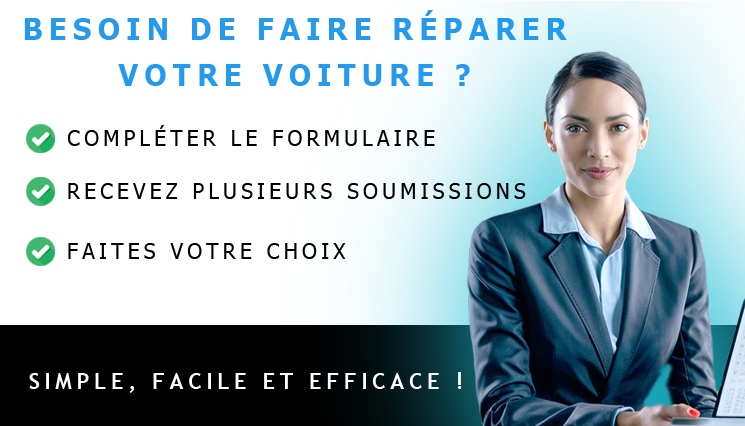
<style>
.page{position:relative;width:745px;height:426px;background:#ffffff}
.page>*{position:absolute;margin:0}
.t1{font:30.4px/45.6px "Verdana-Bold";letter-spacing:0.2em;color:#239aed;text-transform:uppercase;scale:0.9 1}
.t2{font:21.1px "Tahoma";letter-spacing:0.2em;color:#010101;text-transform:uppercase}
.t3{font:22.4px "TrebuchetMS-Bold";letter-spacing:0.2em;color:#fdfdfd;text-transform:uppercase}
</style>
<div class="page">
<p class="t1" style="left:24px;top:10px;width:543px;height:76px;text-align:center">Besoin de faire réparer<br>votre voiture ?</p>
<p class="t2" style="left:67px;top:125px;width:368px;height:21px">Compléter le formulaire</p>
<p class="t2" style="left:68px;top:183px;width:458px;height:16px">Recevez plusieurs soumissions</p>
<p class="t2" style="left:68px;top:243px;width:278px;height:16px">Faites votre choix</p>
<p class="t3" style="left:29px;top:372px;width:433px;height:21px">Simple, facile et efficace !</p>
</div>
